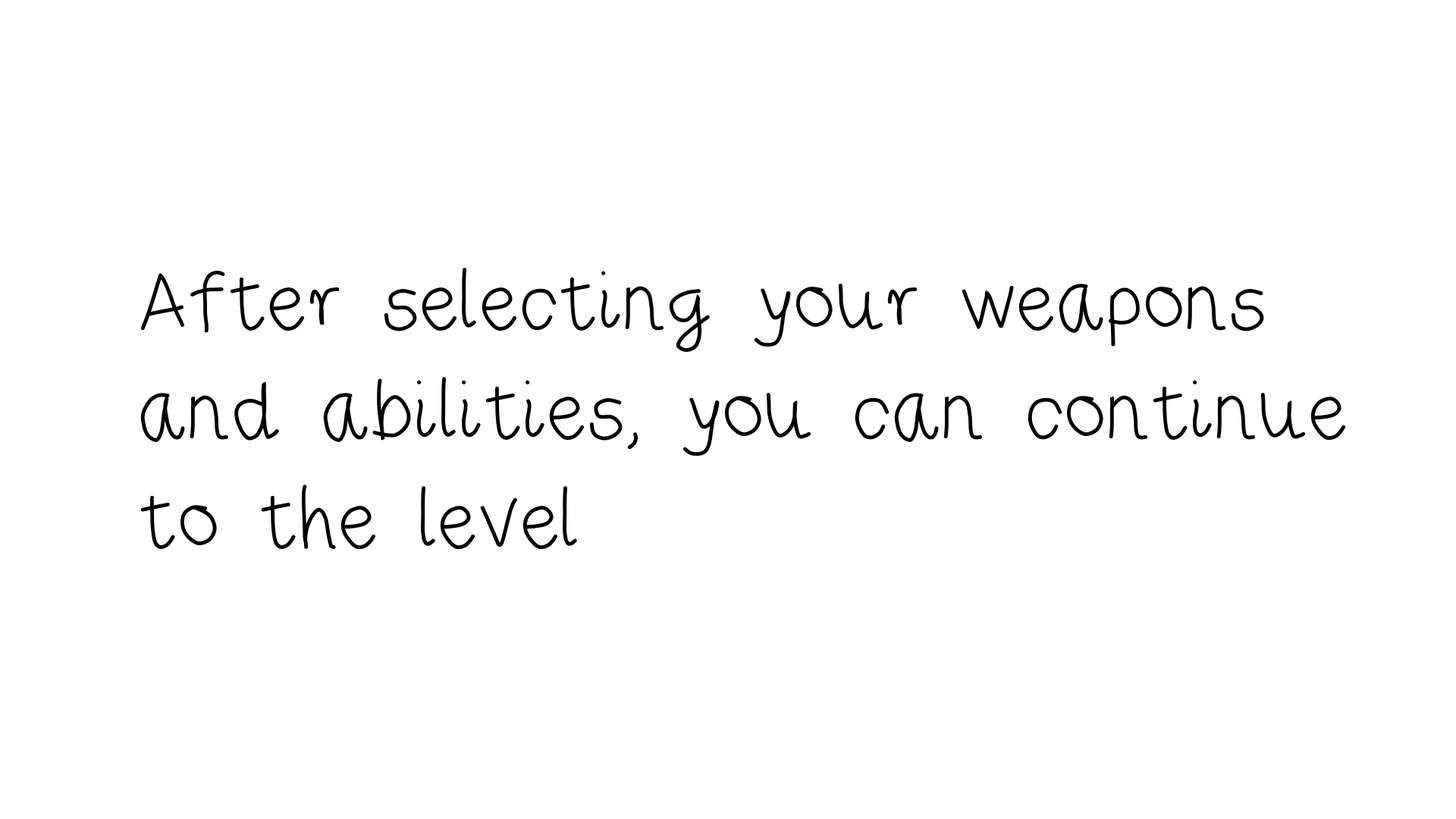
<style>
.page{position:relative;width:1456px;height:819px;background:#ffffff}
.page>*{position:absolute;margin:0}
.t1{font:91px "RiseStarHand";color:#000000}
</style>
<div class="page">
<p class="t1" style="left:140px;top:268px;width:1206px;height:281px">After selecting your weapons <br>and abilities, you can continue<br>to the level</p>
</div>
